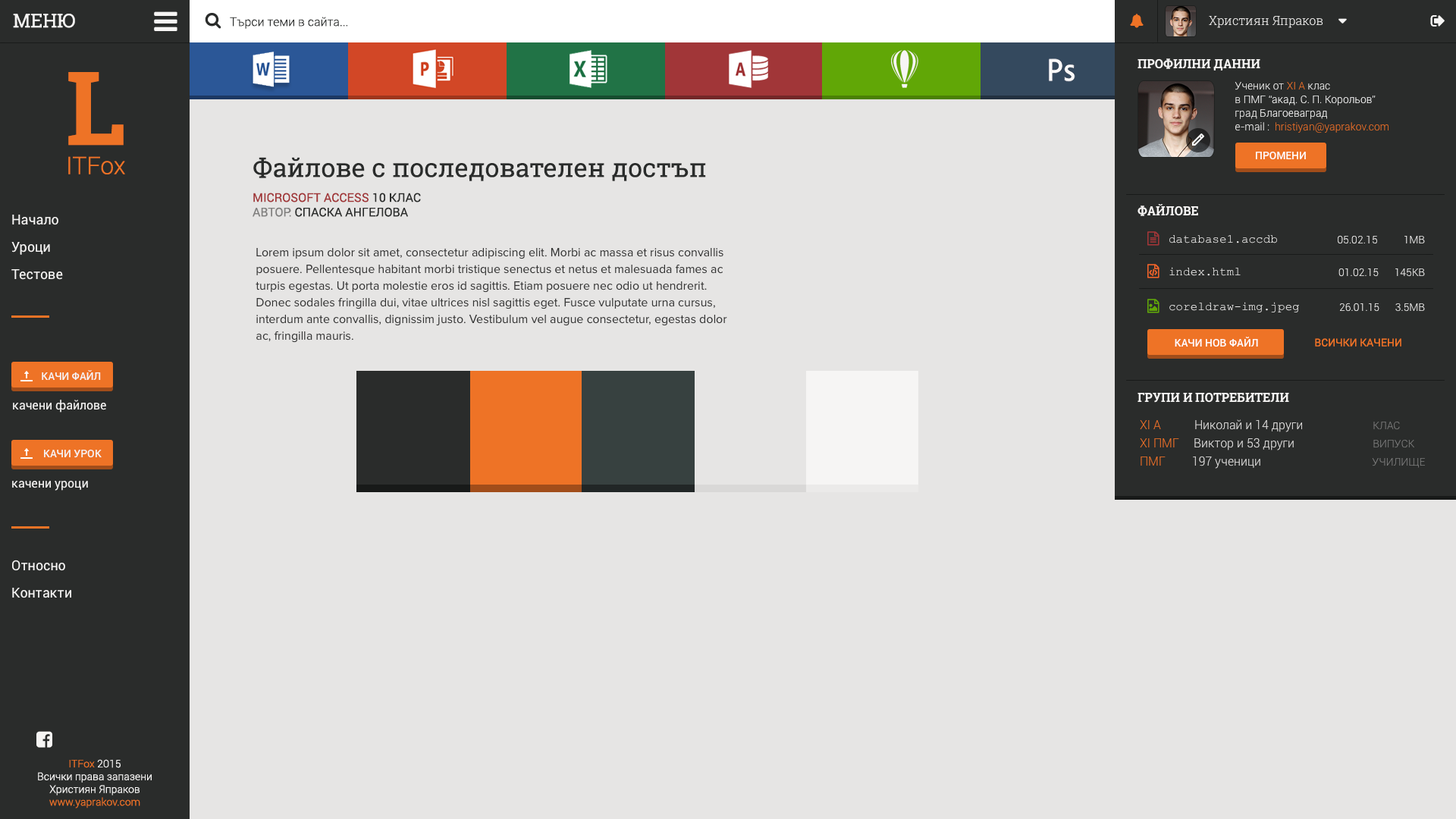
<style>
.page{position:relative;width:1456px;height:819px;background:#e6e5e4}
.page>*{position:absolute;margin:0}
.t1{font:19px "RobotoSlab-Regular";color:#f6f5f4}
.t2{font:12.1px "RobotoSlab-Light";color:#f6f5f4}
.t3{font:12.1px "RobotoSlab-Bold";color:#f6f5f4;text-transform:uppercase}
.t4{font:24.3px "Roboto-Light";color:#ee7326}
.t5{font:102.4px "RobotoSlab-Bold";color:#ee7326}
.t6{font:10.6px/13.6px "Roboto-Light";color:#ffffff}
.t7{font:10.6px/13.6px "Roboto-Light";color:#f6f5f4}
.t8{font:10.6px/13.6px "Roboto-Light";color:#ee7326}
.t9{font:25.8px "RobotoSlab-Regular";color:#2a2c2b}
.t10{font:10.6px "Roboto-Medium";color:#ffffff;text-transform:uppercase}
.t11{font:12.1px "Roboto-Regular";color:#a13638;text-transform:uppercase}
.t12{font:12.1px "Roboto-Regular";color:#2a2c2b;text-transform:uppercase}
.t13{font:12.1px "Roboto-Regular";color:#807f7e;text-transform:uppercase}
.t14{font:13.6px/27.3px "Roboto-Regular";color:#f6f5f4}
.t15{font:12.1px "CourierNewPSMT";color:#f6f5f4}
.t16{font:10.6px "Roboto-Light";color:#f6f5f4}
.t17{font:12.1px/16.7px "ProximaNova-Regular";color:#333333}
.t18{font:10.6px "Roboto-Regular";color:#ee7326;text-transform:uppercase}
.t19{font:10.6px "Roboto-Medium";color:#f6f5f4;text-transform:uppercase}
.t20{font:10.6px "Roboto-Medium";color:#f6f5f4}
.t21{font:10.6px "Roboto-Medium";color:#ee7326}
.t22{font:12.1px "Roboto-Regular";color:#f6f5f4}
.t23{font:12.1px/18.2px "Roboto-Light";color:#e6e5e4}
.t24{font:12.1px/18.2px "Roboto-Light";color:#ee7326}
.t25{font:10.6px/18.2px "Roboto-Light";color:#808080}
.t26{font:10.6px "Roboto-Light";color:#ee7326}
</style>
<div class="page">
<p class="t1" style="left:13px;top:14px;width:62px;height:14px">МЕНЮ</p>
<p class="t2" style="left:1209px;top:16px;width:114px;height:12px">Християн Япраков</p>
<p class="t3" style="left:1137px;top:58px;width:123px;height:13px">профилни данни</p>
<p class="t4" style="left:68px;top:72px;width:57px;height:102px;text-align:center"><span class="t5">L<br></span>ITFox</p>
<p class="t6" style="left:1235px;top:82px;width:153px;height:51px"><span class="t7">Ученик от </span><span class="t8">XI A</span><span class="t7"> клас <br>в </span>ПМГ “акад. С. П. Корольов”<br><span class="t7">град</span> Благоеваград<br><span class="t7">e-mail :  </span><span class="t8">hristiyan@yaprakov.com</span></p>
<p class="t9" style="left:253px;top:157px;width:453px;height:24px">Файлове с последователен достъп</p>
<p class="t10" style="left:1256px;top:151px;width:50px;height:9px">промени</p>
<p class="t11" style="left:253px;top:193px;width:168px;height:24px">microsoft access <span class="t12">10 клас                                         <br></span><span class="t13">Автор:</span><span class="t12"> спаска ангелова</span></p>
<p class="t3" style="left:1137px;top:204px;width:61px;height:12px">файлове</p>
<p class="t14" style="left:11px;top:215px;width:52px;height:65px">Начало<br>Уроци <br>Тестове</p>
<p class="t15" style="left:1169px;top:235px;width:108px;height:8px">database1.accdb</p>
<p class="t16" style="left:1338px;top:235px;width:87px;height:9px">05.02.15          1MB</p>
<p class="t17" style="left:256px;top:248px;width:471px;height:95px">Lorem ipsum dolor sit amet, consectetur adipiscing elit. Morbi ac massa et risus convallis posuere. Pellentesque habitant morbi tristique senectus et netus et malesuada fames ac turpis egestas. Ut porta molestie eros id sagittis. Etiam posuere nec odio ut hendrerit. Donec sodales fringilla dui, vitae ultrices nisl sagittis eget. Fusce vulputate urna cursus, interdum ante convallis, dignissim justo. Vestibulum vel augue consectetur, egestas dolor ac, fringilla mauris.</p>
<p class="t15" style="left:1169px;top:267px;width:72px;height:9px">index.html</p>
<p class="t16" style="left:1338px;top:268px;width:87px;height:9px">01.02.15      145KB</p>
<p class="t15" style="left:1169px;top:302px;width:130px;height:10px">coreldraw-img.jpeg</p>
<p class="t16" style="left:1340px;top:303px;width:85px;height:9px">26.01.15      3.5МB</p>
<p class="t10" style="left:1175px;top:337px;width:83px;height:10px">Качи нов файл</p>
<p class="t18" style="left:1315px;top:338px;width:86px;height:9px">всички качени</p>
<p class="t19" style="left:33px;top:370px;width:68px;height:10px"><span class="t20"><br></span><span class="t21">+ </span>качи файл</p>
<p class="t22" style="left:13px;top:400px;width:93px;height:13px">качени файлове</p>
<p class="t3" style="left:1137px;top:392px;width:152px;height:11px">Групи и потребители</p>
<p class="t23" style="left:1140px;top:419px;width:285px;height:50px"><span class="t24">XI A  </span>Николай и 14 други              <span class="t25">КЛАС<br></span><span class="t24">XI ПМГ</span>     Виктор и 53 други              <span class="t25">ВИПУСК<br></span><span class="t24">ПМГ</span>         197 ученици                       <span class="t25">УЧИЛИЩЕ</span></p>
<p class="t19" style="left:44px;top:449px;width:58px;height:9px">качи урок</p>
<p class="t22" style="left:12px;top:481px;width:76px;height:10px">качени уроци</p>
<p class="t14" style="left:12px;top:560px;width:59px;height:38px">Относно<br>Контакти</p>
<p class="t16" style="left:38px;top:759px;width:114px;height:49px;text-align:center"><span class="t26">ITFox</span> 2015<br>Всички права запазени <br>Християн Япраков <br><span class="t26">www.yaprakov.com</span></p>
</div>
